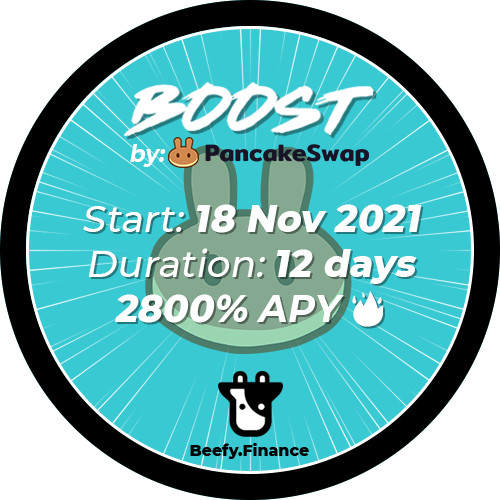
<style>
.page{position:relative;width:500px;height:500px;background:#39c9d2}
.page>*{position:absolute;margin:0}
.t1{font:22.9px "Montserrat-Bold";color:#ffffff;font-style:italic}
.t2{font:37.5px "Montserrat-ExtraBold";color:#ffffff;font-style:italic}
.t3{font:37.5px "Montserrat-Medium";color:#ffffff;font-style:italic}
.t4{font:37.5px "Montserrat-Bold";color:#ffffff;font-style:italic}
.t5{font:37.5px "EmojiOneColor";color:#ffffff}
</style>
<div class="page">
<p class="t1" style="left:130px;top:144px;width:36px;height:23px">by:</p>
<p class="t2" style="left:83px;top:204px;width:339px;height:123px;text-align:center"><span class="t3">Start:</span> 18 Nov 2021<br><span class="t3">Duration: </span>12 days<br>2800% <span class="t4">APY </span><span class="t5">🔥</span></p>
</div>
